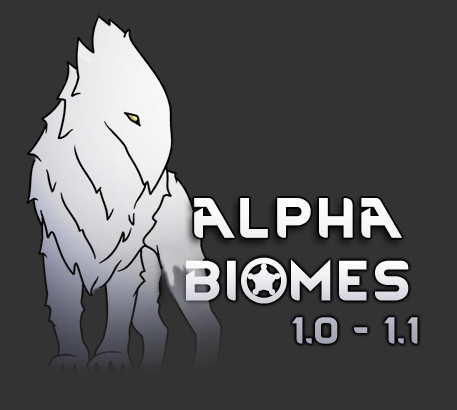
<style>
.page{position:relative;width:457px;height:410px;background:#333333}
.page>*{position:absolute;margin:0}
.t1{font:32px/45.3px "RimWordFont";color:#e8e8ec}
.t2{font:48px/45.3px "RimWordFont";color:#e8e8ec}
</style>
<div class="page">
<p class="t1" style="left:186px;top:257px;width:232px;height:87px"><span class="t2">BIOMES<br></span>        1.0 - 1.1</p>
</div>
